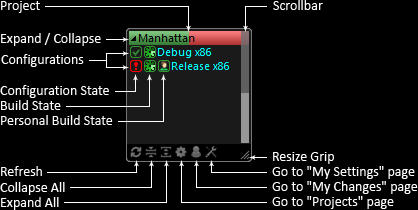
<style>
.page{position:relative;width:418px;height:210px;background:#000000}
.page>*{position:absolute;margin:0}
.t1{font:14px "Calibri";color:#ffffff}
</style>
<div class="page">
<p class="t1" style="left:1px;top:1px;width:39px;height:12px">Project</p>
<p class="t1" style="left:273px;top:0px;width:50px;height:10px">Scrollbar</p>
<p class="t1" style="left:1px;top:33px;width:100px;height:13px">Expand / Collapse</p>
<p class="t1" style="left:1px;top:54px;width:83px;height:13px">Configurations</p>
<p class="t1" style="left:0px;top:85px;width:109px;height:13px">Configuration State</p>
<p class="t1" style="left:1px;top:100px;width:60px;height:10px">Build State</p>
<p class="t1" style="left:1px;top:115px;width:112px;height:10px">Personal Build State</p>
<p class="t1" style="left:273px;top:152px;width:61px;height:12px">Resize Grip</p>
<p class="t1" style="left:1px;top:166px;width:41px;height:10px">Refresh</p>
<p class="t1" style="left:272px;top:166px;width:143px;height:13px">Go to "My Settings" page</p>
<p class="t1" style="left:0px;top:182px;width:65px;height:13px">Collapse All</p>
<p class="t1" style="left:272px;top:181px;width:146px;height:13px">Go to "My Changes" page</p>
<p class="t1" style="left:1px;top:197px;width:58px;height:13px">Expand All</p>
<p class="t1" style="left:272px;top:196px;width:122px;height:13px">Go to "Projects" page</p>
</div>
